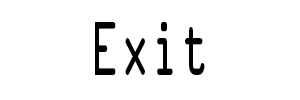
<style>
.page{position:relative;width:300px;height:100px;background:#ffffff}
.page>*{position:absolute;margin:0}
.t1{font:67.8px "OCRAStd";color:#000000;scale:0.61 1}
</style>
<div class="page">
<p class="t1" style="left:95px;top:22px;width:110px;height:53px">Exit</p>
</div>
